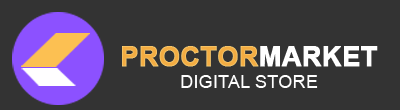
<style>
.page{position:relative;width:400px;height:110px;background:#333333}
.page>*{position:absolute;margin:0}
.t1{font:26.8px "Arial-BoldMT";color:#f3ac42;font-weight:bold}
.t2{font:26.8px "Arial-BoldMT";color:#ffffff;font-weight:bold}
.t3{font:18.5px "ArialMT";color:#ffffff}
</style>
<div class="page">
<p class="t1" style="left:122px;top:46px;width:137px;height:21px">PROCTOR</p>
<p class="t2" style="left:260px;top:46px;width:118px;height:21px">MARKET</p>
<p class="t3" style="left:181px;top:75px;width:137px;height:13px">DIGITAL STORE</p>
</div>
